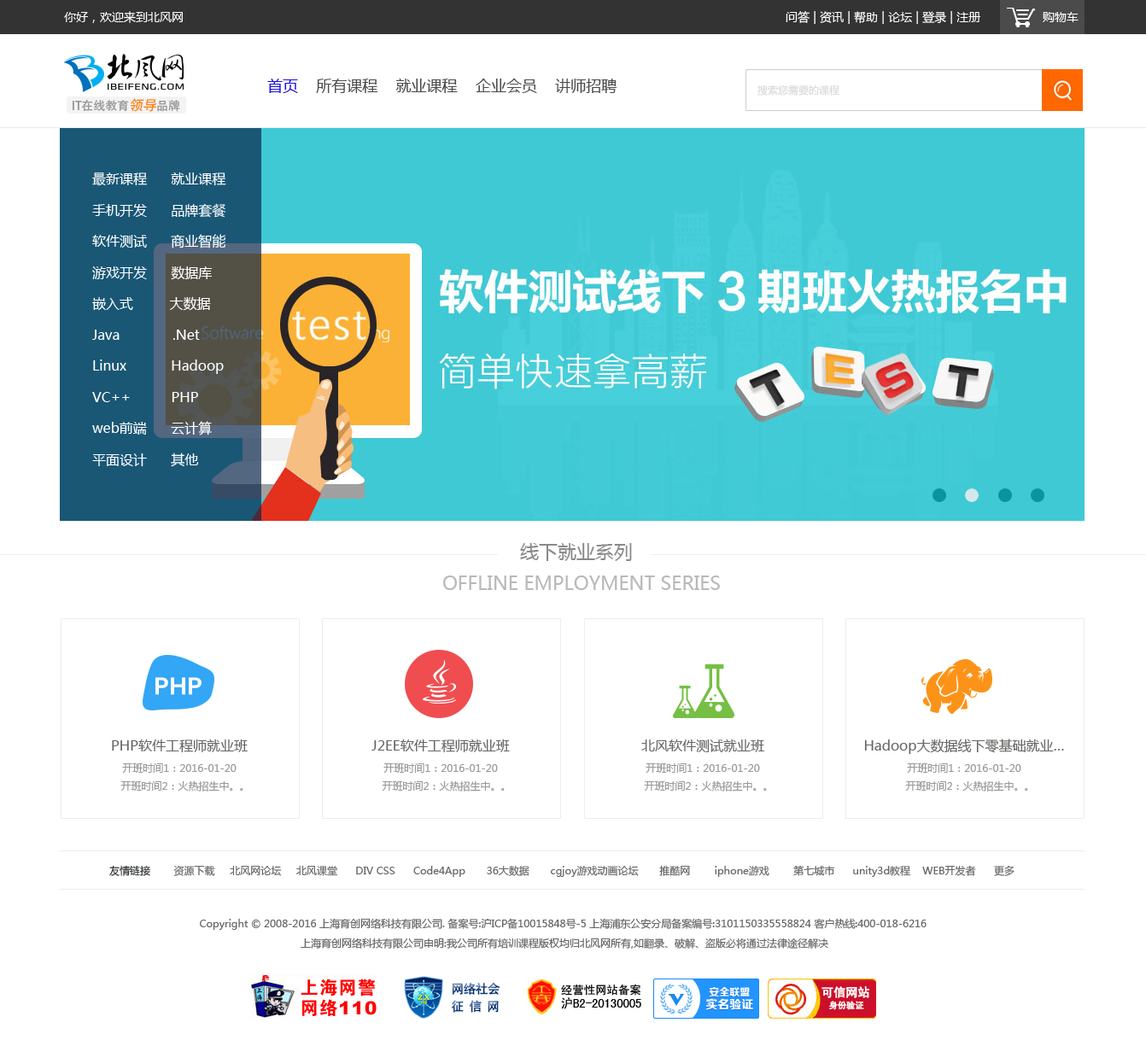
<style>
.page{position:relative;width:1146px;height:1040px;background:#ffffff}
.page>*{position:absolute;margin:0}
.t1{font:12px "MicrosoftYaHei";color:#ffffff}
.t2{font:15.4px "MicrosoftYaHei";color:#4b4b4b}
.t3{font:15.4px "MicrosoftYaHei";color:#1a10dd}
.t4{font:10.2px "MicrosoftYaHei";color:#dad9d9}
.t5{font:13.7px/31.2px "MicrosoftYaHei";color:#ffffff}
.t6{font:18.8px "MicrosoftYaHei";color:#8b8a8a}
.t7{font:18.8px "MicrosoftYaHei";color:#bab8b9}
.t8{font:10.2px/17.5px "MicrosoftYaHei";color:#9a9899}
.t9{font:13.7px/24.3px "MicrosoftYaHei";color:#656764}
.t10{font:10.2px/12.4px "MicrosoftYaHei";color:#9a9899}
.t11{font:10.2px "MicrosoftYaHei";color:#656766}
.t12{font:10.2px "MicrosoftYaHei";color:#2f3331}
.t13{font:10.2px/19.2px "MicrosoftYaHei";color:#656766}
</style>
<div class="page">
<p class="t1" style="left:64px;top:11px;width:119px;height:12px">你好，欢迎来到北风网</p>
<p class="t1" style="left:786px;top:11px;width:195px;height:13px">问答 | 资讯 | 帮助 | 论坛 | 登录 | 注册</p>
<p class="t1" style="left:1043px;top:12px;width:36px;height:10px">购物车</p>
<p class="t2" style="left:267px;top:79px;width:351px;height:14px"><span class="t3">首页</span>    所有课程    就业课程    企业会员    讲师招聘</p>
<p class="t4" style="left:758px;top:85px;width:82px;height:11px">搜索您需要的课程</p>
<p class="t5" style="left:92px;top:173px;width:134px;height:294px">最新课程      就业课程<br>手机开发      品牌套餐<br>软件测试      商业智能<br>游戏开发      数据库<br>嵌入式         大数据<br>Java             .Net<br>Linux           Hadoop<br>VC++          PHP<br>web前端      云计算<br>平面设计      其他</p>
<p class="t6" style="left:520px;top:543px;width:112px;height:18px">线下就业系列</p>
<p class="t7" style="left:443px;top:576px;width:277px;height:14px">OFFLINE EMPLOYMENT SERIES</p>
<p class="t8" style="left:112px;top:740px;width:136px;height:52px;text-align:center"><span class="t9">PHP软件工程师就业班<br></span>开班时间1：2016-01-20<br><span class="t10">    开班时间2：火热招生中。。</span></p>
<p class="t8" style="left:372px;top:740px;width:138px;height:52px;text-align:center"><span class="t9">J2EE软件工程师就业班<br></span>开班时间1：2016-01-20<br><span class="t10">    开班时间2：火热招生中。。</span></p>
<p class="t8" style="left:641px;top:740px;width:126px;height:52px;text-align:center"><span class="t9">北风软件测试就业班<br></span>开班时间1：2016-01-20<br><span class="t10">    开班时间2：火热招生中。。</span></p>
<p class="t9" style="left:864px;top:739px;width:200px;height:53px;text-align:center">Hadoop大数据线下零基础就业…<br><span class="t8">开班时间1：2016-01-20<br></span><span class="t10">    开班时间2：火热招生中。。</span></p>
<p class="t11" style="left:109px;top:865px;width:906px;height:12px"><span class="t12">友情链接</span>  资源下载     北风网论坛     北风课堂      DIV CSS      Code4App       36大数据       cgjoy游戏动画论坛       推酷网        iphone游戏        第七城市      unity3d教程    WEB开发者      更多</p>
<p class="t13" style="left:200px;top:918px;width:727px;height:31px;text-align:center">Copyright © 2008-2016 上海育创网络科技有限公司. 备案号:沪ICP备10015848号-5 上海浦东公安分局备案编号:3101150335558824 客户热线:400-018-6216 <br>上海育创网络科技有限公司申明:我公司所有培训课程版权均归北风网所有,如翻录、破解、盗版必将通过法律途径解决</p>
</div>
